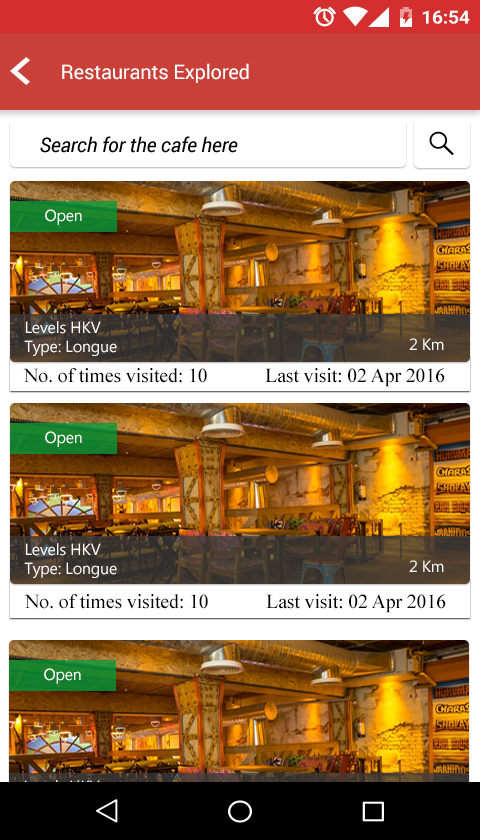
<style>
.page{position:relative;width:480px;height:840px}
.page>*{position:absolute;margin:0}
.t1{font:20px "Roboto-Regular";letter-spacing:-0.01em;color:#ffffff}
.t2{font:20px "Roboto-Italic";letter-spacing:-0.01em;color:#000000}
.t3{font:16px "MicrosoftNewTaiLue";letter-spacing:-0.01em;color:#ffffff}
.t4{font:20px "TimesNewRomanPSMT";letter-spacing:-0.01em;color:#000000}
</style>
<div class="page">
<p class="t1" style="left:62px;top:63px;width:187px;height:20px">Restaurants Explored</p>
<p class="t2" style="left:40px;top:136px;width:198px;height:17px">Search for the cafe here</p>
<p class="t3" style="left:45px;top:209px;width:37px;height:16px">Open</p>
<p class="t3" style="left:24px;top:321px;width:93px;height:35px">Levels HKV<br>Type: Longue</p>
<p class="t3" style="left:409px;top:338px;width:35px;height:12px">2 Km</p>
<p class="t4" style="left:23px;top:368px;width:422px;height:19px">No. of times visited: 10            Last visit: 02 Apr 2016</p>
<p class="t3" style="left:45px;top:431px;width:37px;height:16px">Open</p>
<p class="t3" style="left:24px;top:543px;width:93px;height:35px">Levels HKV<br>Type: Longue</p>
<p class="t3" style="left:409px;top:560px;width:35px;height:12px">2 Km</p>
<p class="t4" style="left:24px;top:594px;width:422px;height:19px">No. of times visited: 10            Last visit: 02 Apr 2016</p>
<p class="t3" style="left:44px;top:668px;width:37px;height:16px">Open</p>
</div>
